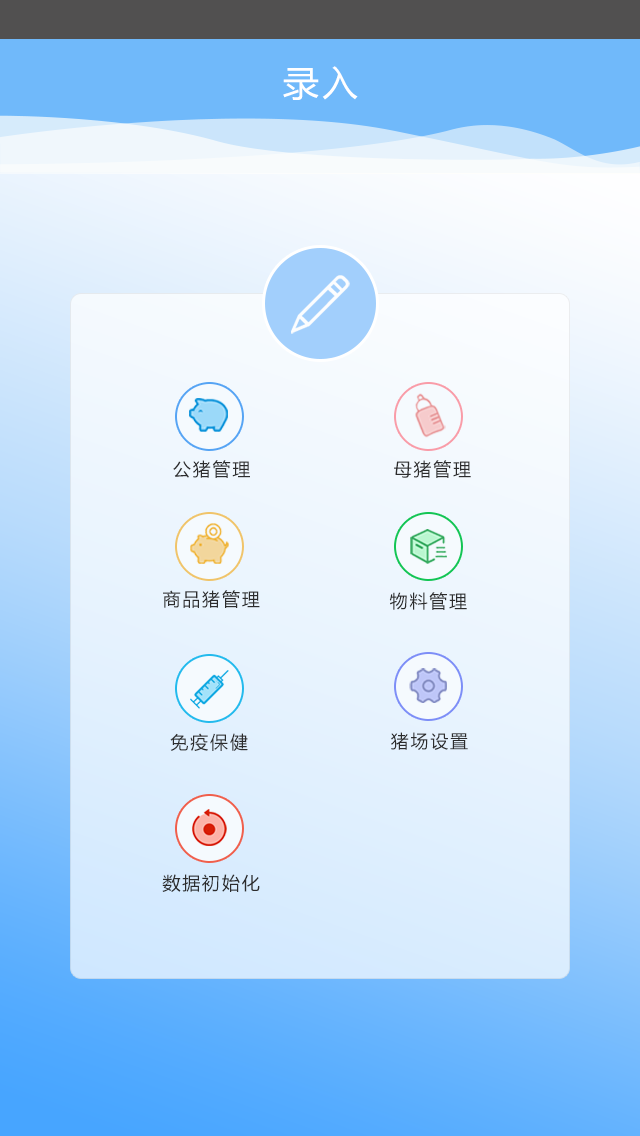
<style>
.page{position:relative;width:640px;height:1136px}
.page>*{position:absolute;margin:0}
.t1{font:36px "MicrosoftYaHei";letter-spacing:0.1em;color:#ffffff}
.t2{font:18px "MicrosoftYaHei";letter-spacing:0.1em;color:#2c2c2d}
</style>
<div class="page">
<p class="t1" style="left:283px;top:66px;width:75px;height:34px">录入</p>
<p class="t2" style="left:173px;top:460px;width:77px;height:18px">公猪管理</p>
<p class="t2" style="left:394px;top:460px;width:77px;height:18px">母猪管理</p>
<p class="t2" style="left:163px;top:590px;width:97px;height:18px">商品猪管理</p>
<p class="t2" style="left:389px;top:592px;width:78px;height:18px">物料管理</p>
<p class="t2" style="left:170px;top:733px;width:78px;height:18px">免疫保健</p>
<p class="t2" style="left:391px;top:732px;width:77px;height:18px">猪场设置</p>
<p class="t2" style="left:162px;top:874px;width:98px;height:18px">数据初始化</p>
</div>
